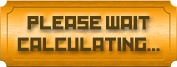
<style>
.page{position:relative;width:177px;height:67px}
.page>*{position:absolute;margin:0}
.t1{font:18px "Kremlin";color:#514016}
</style>
<div class="page">
<p class="t1" style="left:17px;top:16px;width:143px;height:35px;text-align:center">PLEASE WAIT<br>CALCULATING...</p>
</div>
